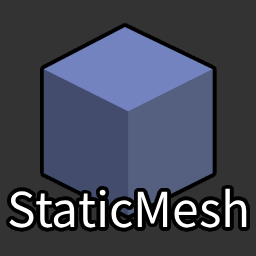
<style>
.page{position:relative;width:256px;height:256px;background:#333333}
.page>*{position:absolute;margin:0}
.t1{font:48px "NotoSansKR-Regular";color:#ffffff}
</style>
<div class="page">
<p class="t1" style="left:9px;top:188px;width:238px;height:40px">StaticMesh</p>
</div>
